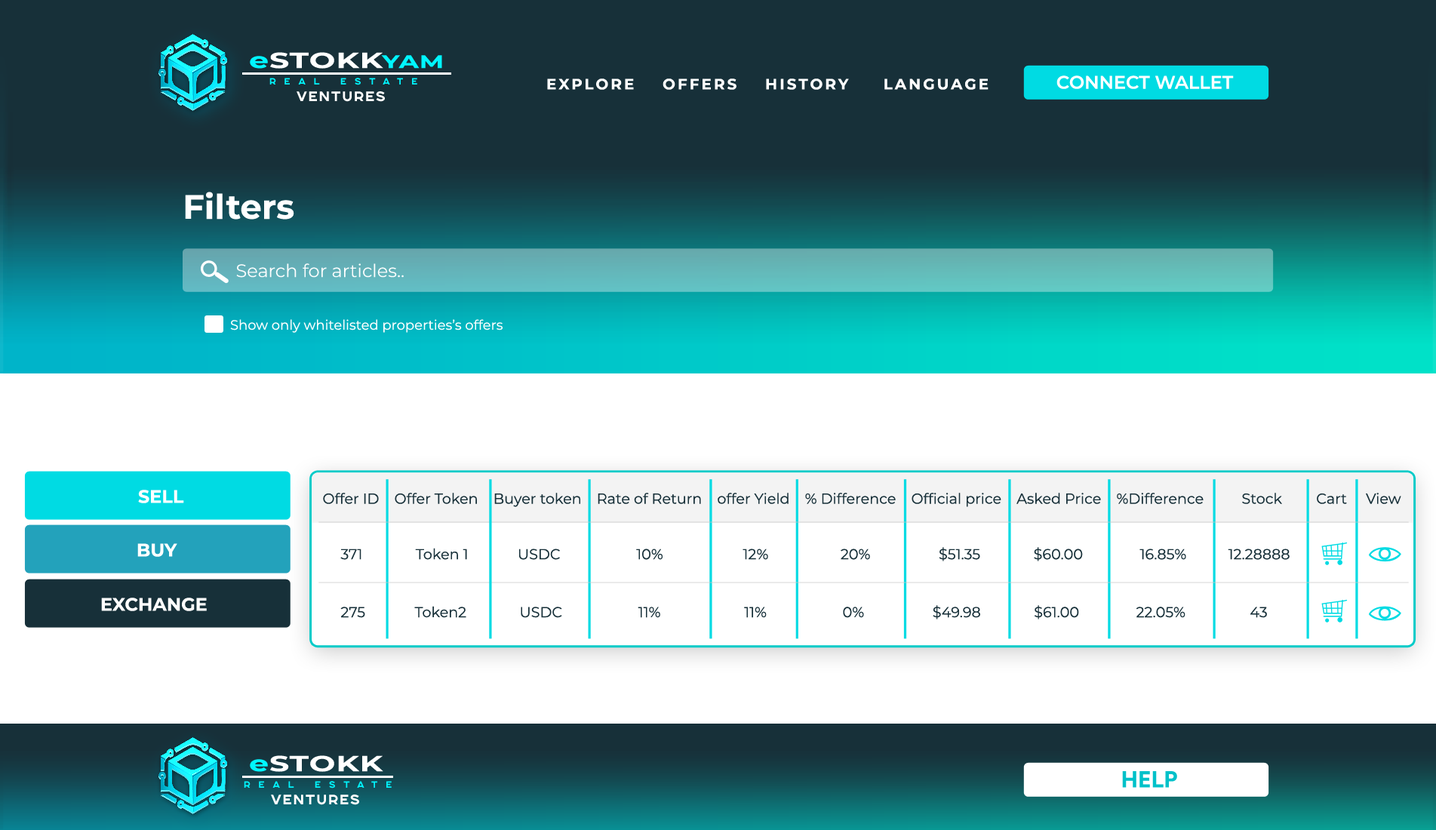
<style>
.page{position:relative;width:1436px;height:830px;background:#ffffff}
.page>*{position:absolute;margin:0}
.t1{font:21.8px "Montserrat-Bold";letter-spacing:0.025em;color:#ffffff;text-transform:uppercase;scale:1.42 1}
.t2{font:21.8px "Montserrat-Bold";letter-spacing:0.025em;color:#00f6ff;scale:1.42 1}
.t3{font:18.1px "Montserrat-Bold";letter-spacing:0.025em;color:#00f6ff;scale:1.42 1}
.t4{font:9.1px "SONGERSemiExpanded-ExtraBold";letter-spacing:0.9em;color:#00f6ff}
.t5{font:18.1px "Montserrat-SemiBold";color:#ffffff;text-transform:uppercase}
.t6{font:15.1px "Montserrat-Bold";letter-spacing:0.15em;color:#ffffff;text-transform:uppercase}
.t7{font:13.6px "SONGERSemiExpanded-ExtraBold";letter-spacing:0.1em;color:#ffffff}
.t8{font:34px "Montserrat-Bold";color:#ffffff}
.t9{font:18.1px "Montserrat-Regular";color:#ffffff}
.t10{font:13.6px "Montserrat-Regular";color:#ffffff}
.t11{font:18.1px "Montserrat-Bold";color:#ffffff;text-transform:uppercase}
.t12{font:14.5px "Montserrat-Regular";color:#173039}
.t13{font:22.6px "CircularStd-Bold";color:#00c1c9}
</style>
<div class="page">
<p class="t1" style="left:250px;top:52px;width:192px;height:17px"><span class="t2">e</span>STOKK<span class="t3">YAM</span></p>
<p class="t4" style="left:269px;top:78px;width:148px;height:7px">REAL ESTATE</p>
<p class="t5" style="left:1057px;top:75px;width:177px;height:14px">connect wallet</p>
<p class="t6" style="left:547px;top:78px;width:442px;height:12px">Explore    Offers    History     Language</p>
<p class="t7" style="left:297px;top:91px;width:88px;height:11px">VENTUREs</p>
<p class="t8" style="left:185px;top:192px;width:109px;height:28px">Filters</p>
<p class="t9" style="left:236px;top:263px;width:168px;height:15px">Search for articles..</p>
<p class="t10" style="left:230px;top:319px;width:273px;height:14px">Show only whitelisted properties’s offers</p>
<p class="t11" style="left:138px;top:490px;width:46px;height:13px">Sell</p>
<p class="t12" style="left:323px;top:493px;width:1079px;height:14px">Offer ID    Offer Token    Buyer token    Rate of Return    offer Yield    % Difference    Official price    Asked Price    %Difference          Stock         Cart     View</p>
<p class="t11" style="left:137px;top:543px;width:40px;height:14px">Buy</p>
<p class="t12" style="left:340px;top:547px;width:950px;height:15px">371              Token 1             USDC                    10%                     12%                   20%                  $51.35              $60.00               16.85%           12.28888</p>
<p class="t11" style="left:101px;top:598px;width:106px;height:13px">Exchange</p>
<p class="t12" style="left:340px;top:605px;width:927px;height:15px">275             Token2              USDC                    11%                      11%                    0%                  $49.98              $61.00               22.05%                 43</p>
<p class="t1" style="left:250px;top:756px;width:133px;height:16px"><span class="t2">e</span>STOKK</p>
<p class="t13" style="left:1122px;top:771px;width:55px;height:17px">HELP</p>
<p class="t4" style="left:244px;top:781px;width:148px;height:8px">REAL ESTATE</p>
<p class="t7" style="left:271px;top:795px;width:88px;height:10px">VENTUREs</p>
</div>
